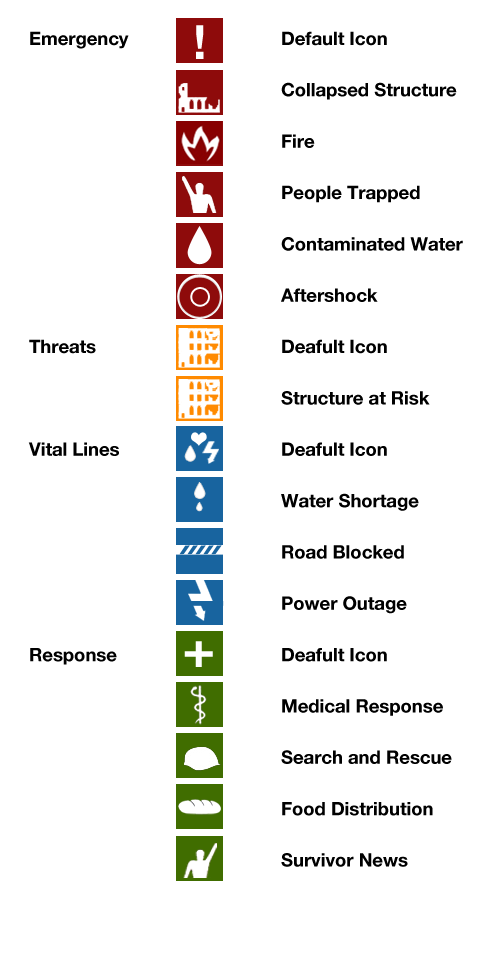
<style>
.page{position:relative;width:504px;height:954px;background:#ffffff}
.page>*{position:absolute;margin:0}
.t1{font:47.3px "HelveticaNeue-Bold";color:#ffffff}
.t2{font:18.5px/51.3px "HelveticaNeue-Bold";color:#000000}
.t3{font:51.1px "HelveticaNeue-Bold";color:#ffffff;scale:1.08 1}
</style>
<div class="page">
<p class="t1" style="left:196px;top:25px;width:8px;height:34px">!</p>
<p class="t2" style="left:28px;top:31px;width:435px;height:836px">Emergency     Default Icon<br>       Collapsed Structure<br>       Fire<br>       People Trapped<br>       Contaminated Water<br>       Aftershock<br>Threats      Deafult Icon<br>       Structure at Risk<br>Vital Lines     Deafult Icon<br>       Water Shortage<br>       Road Blocked<br>       Power Outage<br>Response     Deafult Icon<br>       Medical Response<br>       Search and Rescue <br>       Food Distribution<br>       Survivor News</p>
<p class="t3" style="left:184px;top:641px;width:29px;height:26px">+</p>
</div>
